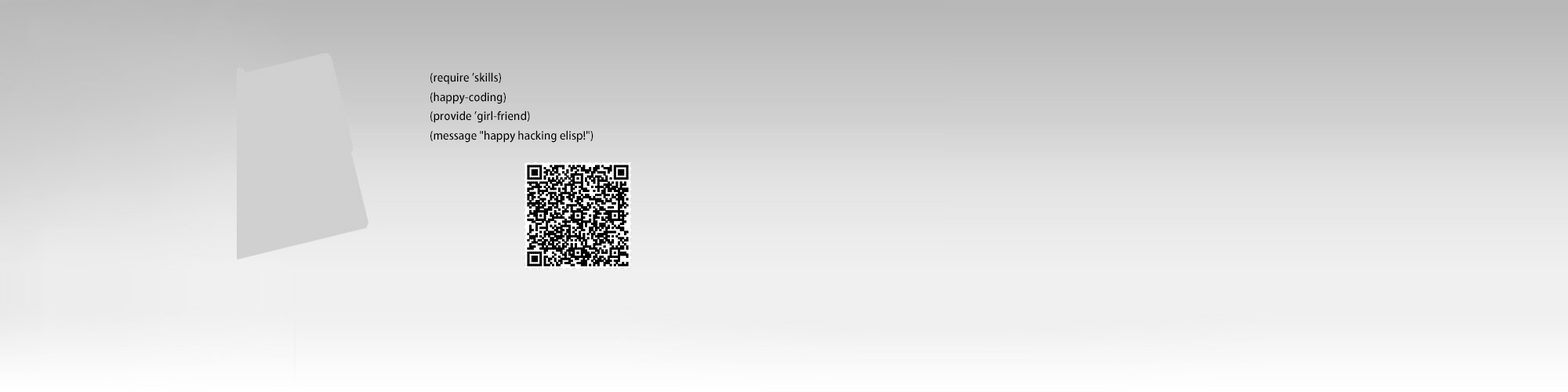
<style>
.page{position:relative;width:1568px;height:392px}
.page>*{position:absolute;margin:0}
.t1{font:11px "AdobeHeitiStd-Regular";color:#000000}
</style>
<div class="page">
<p class="t1" style="left:430px;top:72px;width:163px;height:71px">(require 'skills)<br>(happy-coding)<br>(provide 'girl-friend)<br>(message "happy hacking elisp!")</p>
</div>
